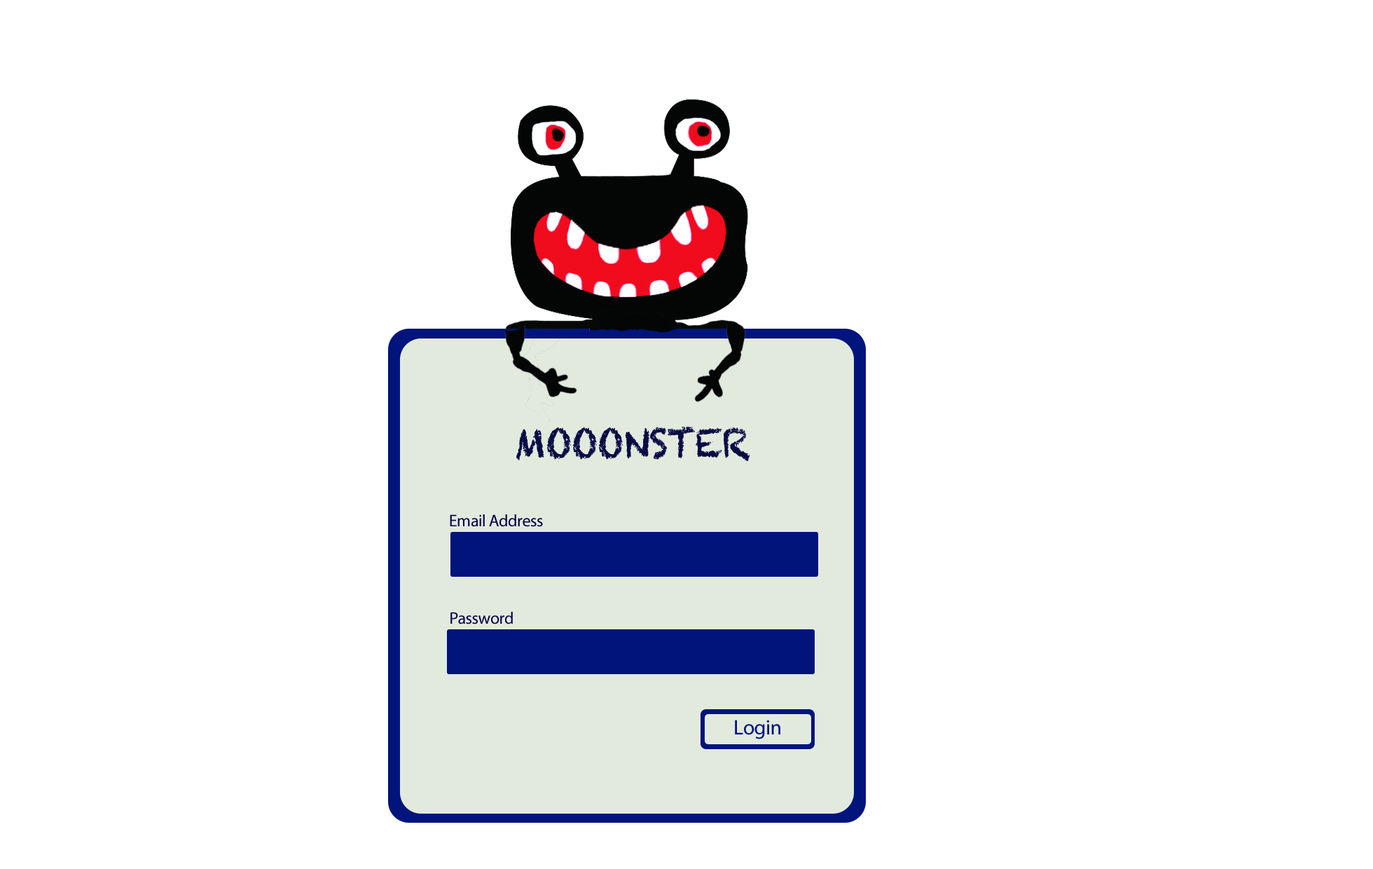
<style>
.page{position:relative;width:1373px;height:869px;background:#ffffff}
.page>*{position:absolute;margin:0}
.t1{font:39.1px "Chalkduster";letter-spacing:-0.02em;color:#090b43;scale:0.95 1}
.t2{font:16.8px "MyriadPro-Regular";letter-spacing:-0.02em;color:#030047}
.t3{font:21px "MyriadPro-Regular";letter-spacing:-0.02em;color:#00147c}
</style>
<div class="page">
<p class="t1" style="left:516px;top:426px;width:233px;height:35px">MOOONSTER</p>
<p class="t2" style="left:450px;top:514px;width:93px;height:13px">Email Address</p>
<p class="t2" style="left:450px;top:611px;width:63px;height:13px">Password</p>
<p class="t3" style="left:735px;top:719px;width:45px;height:20px">Login</p>
</div>
